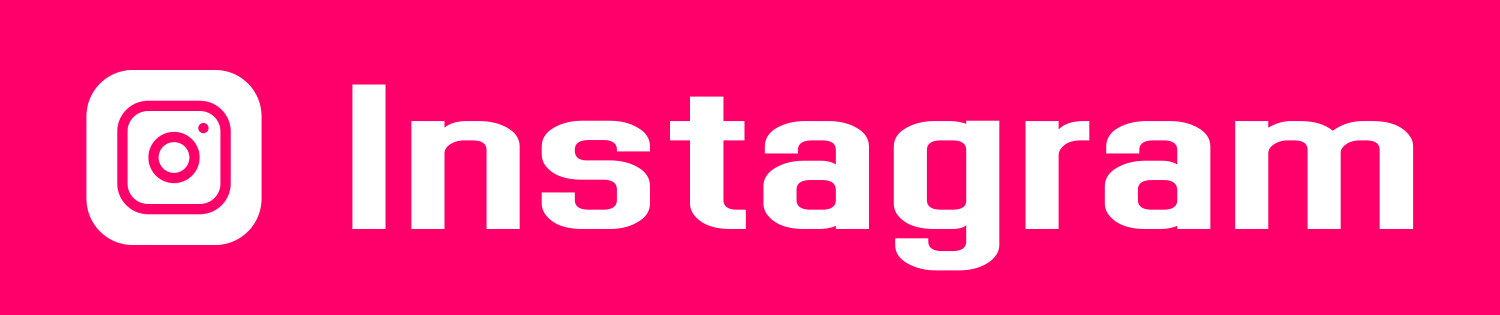
<style>
.page{position:relative;width:1500px;height:315px;background:#ff006a}
.page>*{position:absolute;margin:0}
.t1{font:300px "Dhurjati";color:#ffffff}
</style>
<div class="page">
<p class="t1" style="left:352px;top:84px;width:1062px;height:187px">Instagram</p>
</div>
